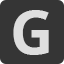
<style>
.page{position:relative;width:64px;height:64px;background:#353535}
.page>*{position:absolute;margin:0}
.t1{font:60px "DroidSans-Bold";color:#dedede}
</style>
<div class="page">
<p class="t1" style="left:13px;top:10px;width:36px;height:45px">G</p>
</div>
